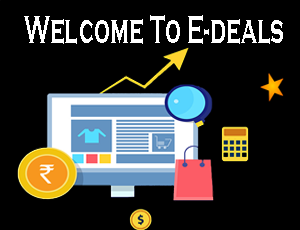
<style>
.page{position:relative;width:300px;height:230px;background:#000000}
.page>*{position:absolute;margin:0}
.t1{font:40.8px "CopperplateGothic-Bold";color:#ffffff;scale:0.57 1}
</style>
<div class="page">
<p class="t1" style="left:24px;top:15px;width:259px;height:29px">Welcome To E-deals</p>
</div>
